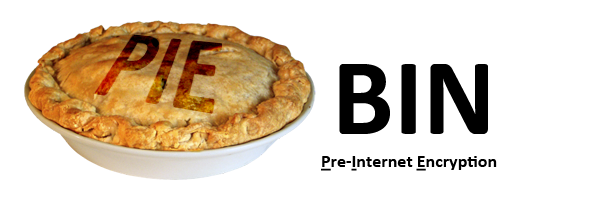
<style>
.page{position:relative;width:600px;height:200px;background:#ffffff}
.page>*{position:absolute;margin:0}
.t1{font:110px "Calibri-Bold";color:#000000}
.t2{font:18px "Calibri-Bold";color:#000000}
.t3{font:18px "Calibri-Bold";color:#000000;text-decoration:underline}
</style>
<div class="page">
<p class="t1" style="left:339px;top:64px;width:149px;height:70px">BIN</p>
<p class="t2" style="left:321px;top:156px;width:176px;height:15px"><span class="t3">P</span>re-<span class="t3">I</span>nternet <span class="t3">E</span>ncryption</p>
</div>
